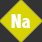
<style>
.page{position:relative;width:42px;height:42px;background:#333333}
.page>*{position:absolute;margin:0}
.t1{font:20px "AbadiMT-CondensedExtraBold";color:#ffffff}
</style>
<div class="page">
<p class="t1" style="left:11px;top:14px;width:20px;height:14px">Na</p>
</div>
